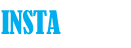
<style>
.page{position:relative;width:131px;height:48px;background:#ffffff}
.page>*{position:absolute;margin:0}
.t1{font:30px "BernardMT-Condensed";letter-spacing:-0.02em;color:#00adee}
</style>
<div class="page">
<p class="t1" style="left:1px;top:10px;width:60px;height:25px">INSTA</p>
</div>
